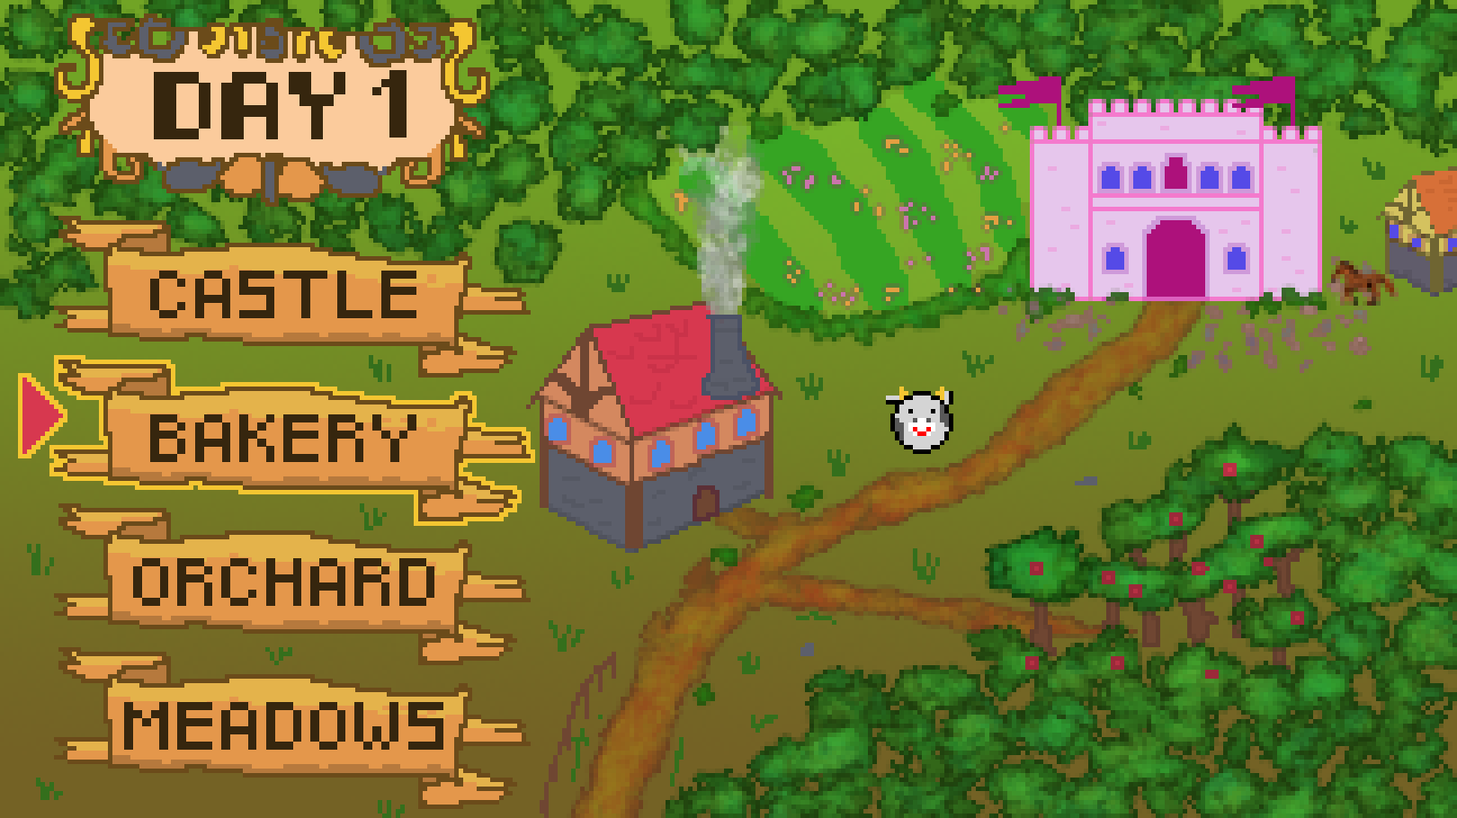
<style>
.page{position:relative;width:1457px;height:818px}
.page>*{position:absolute;margin:0}
.t1{font:67.6px "8-bit-pusab";color:#36260e}
.t2{font:50.8px "8-bit-pusab";color:#36260e}
.t3{font:39.4px "Pixeled";color:#36260e;scale:1.13 1}
</style>
<div class="page">
<p class="t1" style="left:154px;top:72px;width:191px;height:67px">day</p>
<p class="t2" style="left:372px;top:70px;width:35px;height:68px">1</p>
<p class="t3" style="left:150px;top:271px;width:266px;height:47px">CASTLE</p>
<p class="t3" style="left:150px;top:415px;width:266px;height:47px">BAKERY</p>
<p class="t3" style="left:133px;top:559px;width:301px;height:47px">ORCHARD</p>
<p class="t3" style="left:124px;top:702px;width:319px;height:48px">MEADOWS</p>
</div>
